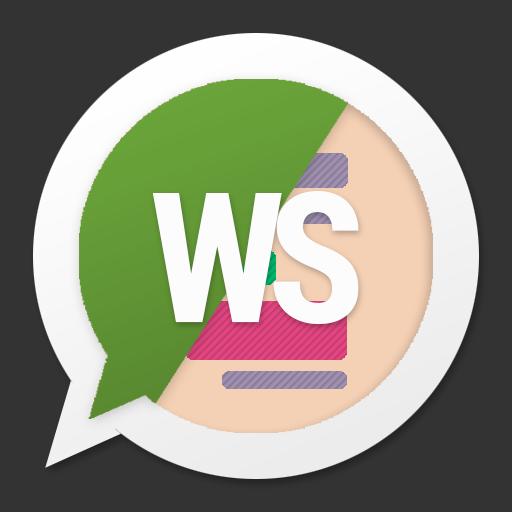
<style>
.page{position:relative;width:512px;height:512px;background:#333333}
.page>*{position:absolute;margin:0}
.t1{font:182px "RobotoCondensed-Bold";letter-spacing:-0.1em;color:#fcfcfc}
</style>
<div class="page">
<p class="t1" style="left:152px;top:191px;width:207px;height:133px">WS</p>
</div>
